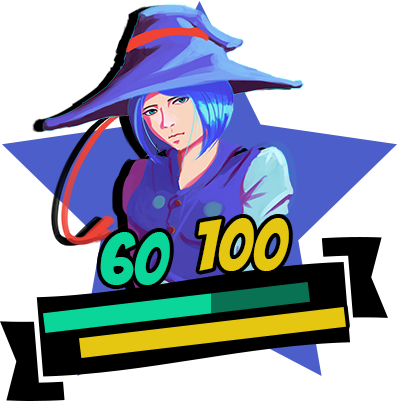
<style>
.page{position:relative;width:397px;height:401px;background:#ffffff}
.page>*{position:absolute;margin:0}
.t1{font:72px "Bangers-Regular";color:#e5c711}
.t2{font:72px "Bangers-Regular";color:#0ad699}
</style>
<div class="page">
<p class="t1" style="left:198px;top:218px;width:91px;height:53px">100</p>
<p class="t2" style="left:100px;top:232px;width:70px;height:53px">60</p>
</div>
